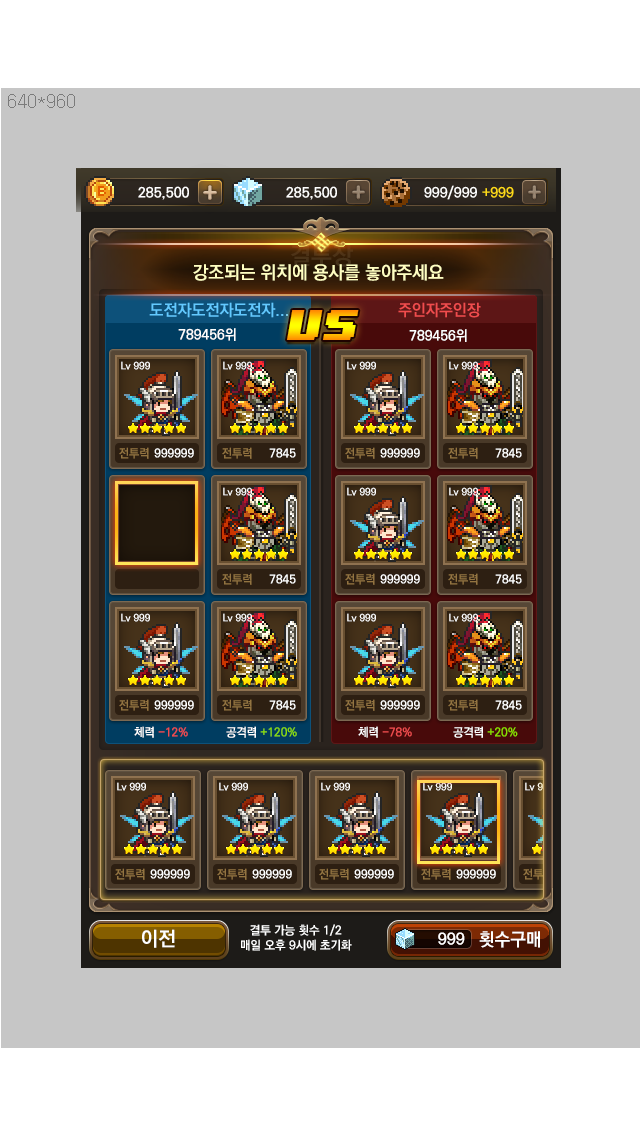
<style>
.page{position:relative;width:640px;height:1136px;background:#c6c6c6}
.page>*{position:absolute;margin:0}
.t1{font:18px "KoPubDotumBold";color:#fffec1}
.t2{font:16px "KoPubDotumBold";color:#62c9ff}
.t3{font:16px "KoPubDotumBold";color:#f04c4d}
.t4{font:36px "8BITWONDERNominal";font-style:italic}
.t5{font:14px "KoPubDotumBold";color:#ffffff}
.t6{font:10px "KoPubDotumBold";color:#ffffff}
.t7{font:12px "KoPubDotumBold";color:#937441}
.t8{font:12px "KoPubDotumBold";color:#ffffff}
.t9{font:12px "KoPubDotumBold";color:#f04c4d}
.t10{font:12px "KoPubDotumBold";color:#8ae001}
.t11{font:20px "KoPubDotumBold";color:#ffffff}
.t12{font:16px "KoPubDotumBold";color:#ffffff}
.t13{font:18px "KoPubDotumBold";color:#ffffff}
</style>
<div class="page">
<p class="t1" style="left:193px;top:264px;width:251px;height:17px">강조되는 위치에 용사를 놓아주세요</p>
<p class="t2" style="left:149px;top:302px;width:139px;height:16px">도전자도전자도전자...</p>
<p class="t3" style="left:398px;top:302px;width:83px;height:16px">주인자주인장</p>
<p class="t4" style="left:287px;top:310px;width:72px;height:30px">vs</p>
<p class="t5" style="left:178px;top:328px;width:58px;height:13px">789456위</p>
<p class="t5" style="left:409px;top:329px;width:58px;height:13px">789456위</p>
<p class="t6" style="left:121px;top:361px;width:29px;height:9px">Lv 999</p>
<p class="t6" style="left:223px;top:361px;width:29px;height:9px">Lv 999</p>
<p class="t7" style="left:119px;top:447px;width:30px;height:12px">전투력</p>
<p class="t8" style="left:154px;top:448px;width:40px;height:10px">999999</p>
<p class="t7" style="left:222px;top:447px;width:30px;height:12px">전투력</p>
<p class="t8" style="left:269px;top:448px;width:27px;height:10px">7845</p>
<p class="t9" style="left:134px;top:726px;width:54px;height:12px"><span class="t8">체력 </span>-12%</p>
<p class="t10" style="left:226px;top:726px;width:71px;height:12px"><span class="t8">공격력 </span>+120%</p>
<p class="t9" style="left:358px;top:726px;width:54px;height:12px"><span class="t8">체력 </span>-78%</p>
<p class="t10" style="left:453px;top:726px;width:65px;height:12px"><span class="t8">공격력 </span>+20%</p>
<p class="t11" style="left:142px;top:929px;width:33px;height:19px">이전</p>
<p class="t8" style="left:241px;top:924px;width:111px;height:27px;text-align:center">결투 가능 횟수 1/2<br>매일 오후 9시에 초기화</p>
<p class="t12" style="left:438px;top:932px;width:27px;height:13px">999</p>
<p class="t13" style="left:479px;top:931px;width:61px;height:17px">횟수구매</p>
</div>
